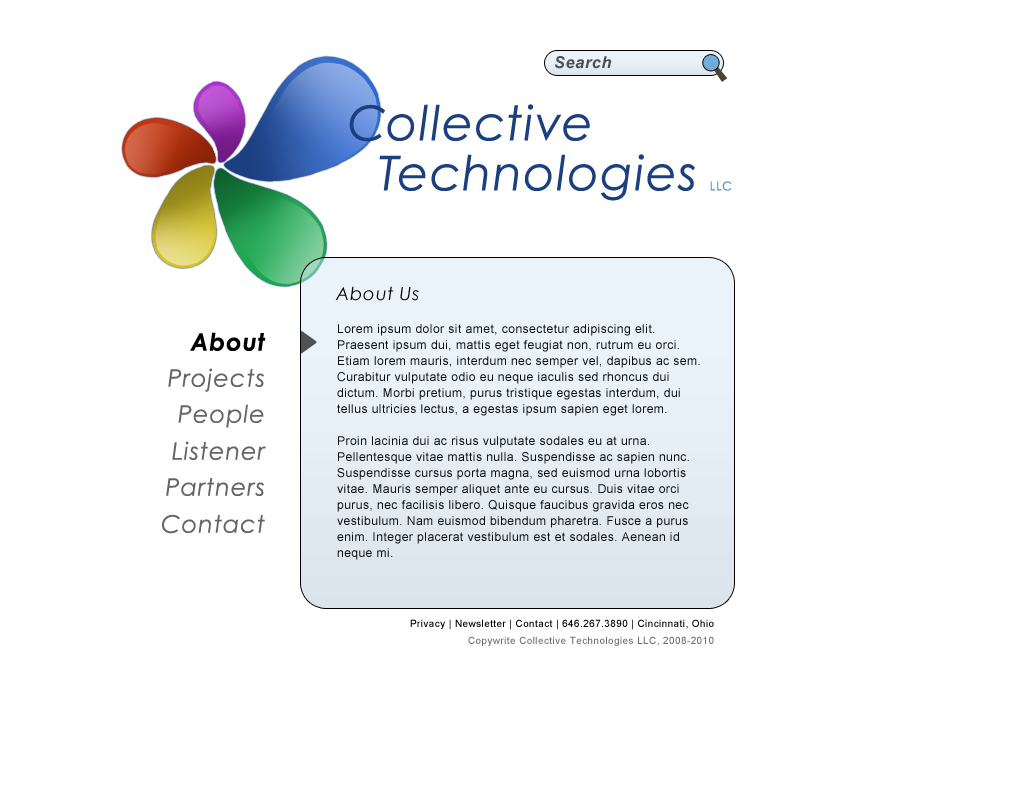
<style>
.page{position:relative;width:1024px;height:800px;background:#ffffff}
.page>*{position:absolute;margin:0}
.t1{font:16.2px "Arial-BoldItalicMT";letter-spacing:0.04em;color:#4e4e4e}
.t2{font:48px/50px "CenturyGothic-Italic";letter-spacing:0.04em;color:#1c3f80}
.t3{font:12px/32px "CenturyGothic";letter-spacing:0.08em;color:#4296d1}
.t4{font:18px "CenturyGothic-Italic";letter-spacing:0.04em;color:#000000}
.t5{font:12px/16px "ArialMT";letter-spacing:0.04em;color:#0c0f11}
.t6{font:24px "CenturyGothic-BoldItalic";letter-spacing:0.04em;color:#000000}
.t7{font:24px "CenturyGothic-Italic";letter-spacing:0.04em;color:#656565}
.t8{font:10px "ArialMT";letter-spacing:0.04em;color:#000000}
.t9{font:10px "ArialMT";letter-spacing:0.04em;color:#6f6f6f}
</style>
<div class="page">
<p class="t1" style="left:555px;top:56px;width:57px;height:13px">Search</p>
<p class="t2" style="left:349px;top:104px;width:383px;height:97px">Collective <br>  Technologies <span class="t3">LLC</span></p>
<p class="t4" style="left:335px;top:286px;width:84px;height:15px">About Us</p>
<p class="t5" style="left:337px;top:324px;width:363px;height:236px">Lorem ipsum dolor sit amet, consectetur adipiscing elit. Praesent ipsum dui, mattis eget feugiat non, rutrum eu orci. Etiam lorem mauris, interdum nec semper vel, dapibus ac sem. Curabitur vulputate odio eu neque iaculis sed rhoncus dui dictum. Morbi pretium, purus tristique egestas interdum, dui tellus ultricies lectus, a egestas ipsum sapien eget lorem. <br><br>Proin lacinia dui ac risus vulputate sodales eu at urna. Pellentesque vitae mattis nulla. Suspendisse ac sapien nunc. Suspendisse cursus porta magna, sed euismod urna lobortis vitae. Mauris semper aliquet ante eu cursus. Duis vitae orci purus, nec facilisis libero. Quisque faucibus gravida eros nec vestibulum. Nam euismod bibendum pharetra. Fusce a purus enim. Integer placerat vestibulum est et sodales. Aenean id neque mi.</p>
<p class="t6" style="left:190px;top:332px;width:76px;height:19px">About</p>
<p class="t7" style="left:168px;top:368px;width:96px;height:24px">Projects</p>
<p class="t7" style="left:178px;top:404px;width:86px;height:24px">People</p>
<p class="t7" style="left:172px;top:441px;width:94px;height:19px">Listener</p>
<p class="t7" style="left:166px;top:478px;width:98px;height:18px">Partners</p>
<p class="t7" style="left:162px;top:514px;width:103px;height:20px">Contact</p>
<p class="t8" style="left:410px;top:619px;width:304px;height:11px">Privacy | Newsletter | Contact | 646.267.3890 | Cincinnati, Ohio</p>
<p class="t9" style="left:468px;top:636px;width:246px;height:10px">Copywrite Collective Technologies LLC, 2008-2010</p>
</div>
